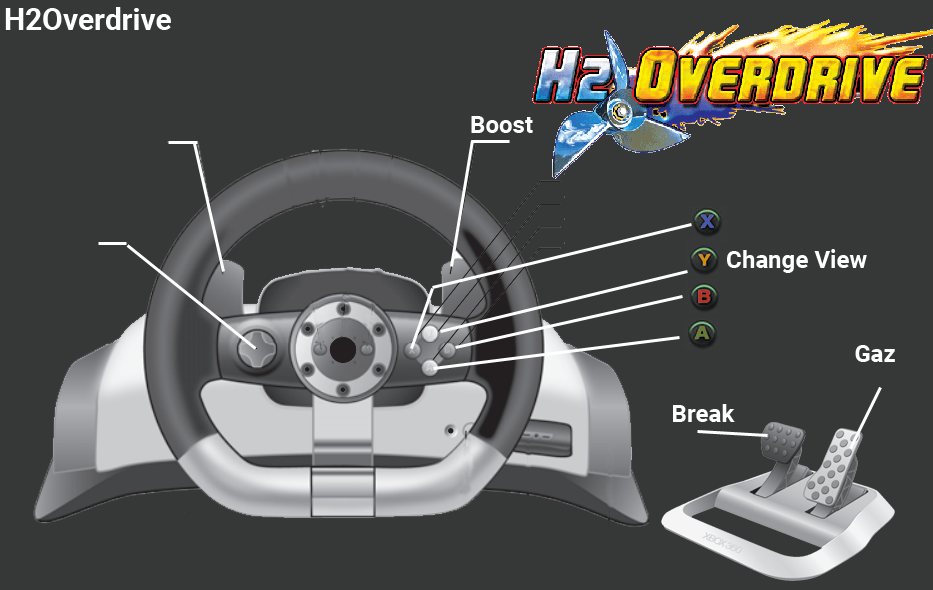
<style>
.page{position:relative;width:933px;height:590px;background:#363838}
.page>*{position:absolute;margin:0}
.t1{font:30px "Roboto-Bold";color:#ffffff}
.t2{font:24px "Roboto-Bold";color:#ffffff}
</style>
<div class="page">
<p class="t1" style="left:5px;top:7px;width:166px;height:23px">H2Overdrive</p>
<p class="t2" style="left:471px;top:116px;width:62px;height:17px">Boost</p>
<p class="t2" style="left:727px;top:249px;width:140px;height:24px">Change View</p>
<p class="t2" style="left:855px;top:345px;width:40px;height:17px">Gaz</p>
<p class="t2" style="left:673px;top:404px;width:62px;height:18px">Break</p>
</div>
